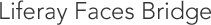
<style>
.page{position:relative;width:211px;height:25px;background:#ffffff}
.page>*{position:absolute;margin:0}
.t1{font:24px "Avenir-Light";color:#333333}
</style>
<div class="page">
<p class="t1" style="left:0px;top:0px;width:211px;height:25px">Liferay Faces Bridge</p>
</div>
